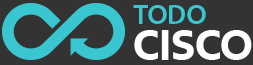
<style>
.page{position:relative;width:253px;height:65px;background:#333333}
.page>*{position:absolute;margin:0}
.t1{font:41.7px/36.6px "EMprintW04-Bold";color:#ffffff}
.t2{font:28.3px/36.6px "MyriadPro-Semibold";color:#39c6d0}
</style>
<div class="page">
<p class="t1" style="left:133px;top:5px;width:119px;height:55px"><span class="t2">TODO<br></span>CISCO</p>
</div>
